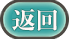
<style>
.page{position:relative;width:69px;height:39px}
.page>*{position:absolute;margin:0}
.t1{font:24px "RyuminPr6N-ExBold";color:#fff7f5}
</style>
<div class="page">
<p class="t1" style="left:12px;top:9px;width:45px;height:22px">返回</p>
</div>
